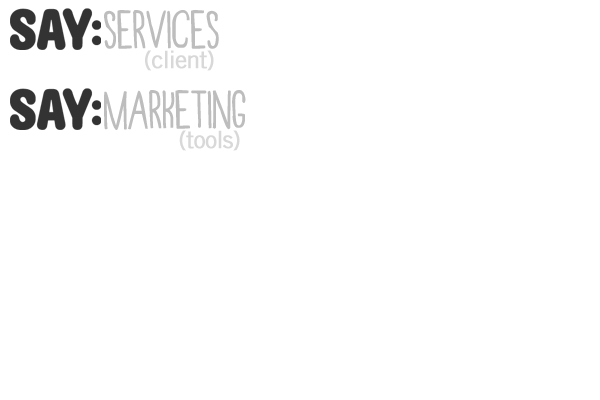
<style>
.page{position:relative;width:600px;height:400px;background:#ffffff}
.page>*{position:absolute;margin:0}
.t1{font:42px "AlexoidHandCondensed";letter-spacing:-0.05em;color:#bebdbd;font-weight:bold}
.t2{font:24px "TradeGothicLTStd";letter-spacing:-0.05em;color:#d8d8d8;font-weight:bold}
</style>
<div class="page">
<p class="t1" style="left:104px;top:10px;width:115px;height:39px">services</p>
<p class="t2" style="left:145px;top:50px;width:69px;height:21px">(client)</p>
<p class="t1" style="left:104px;top:90px;width:142px;height:40px">Marketing</p>
<p class="t2" style="left:179px;top:130px;width:61px;height:21px">(tools)</p>
</div>
